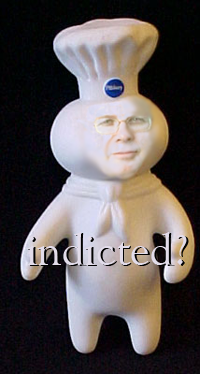
<style>
.page{position:relative;width:200px;height:374px}
.page>*{position:absolute;margin:0}
.t1{font:44.9px "GoudyOldStyleBT-Roman";color:#e2dcea}
</style>
<div class="page">
<p class="t1" style="left:26px;top:232px;width:161px;height:33px">indicted?</p>
</div>
